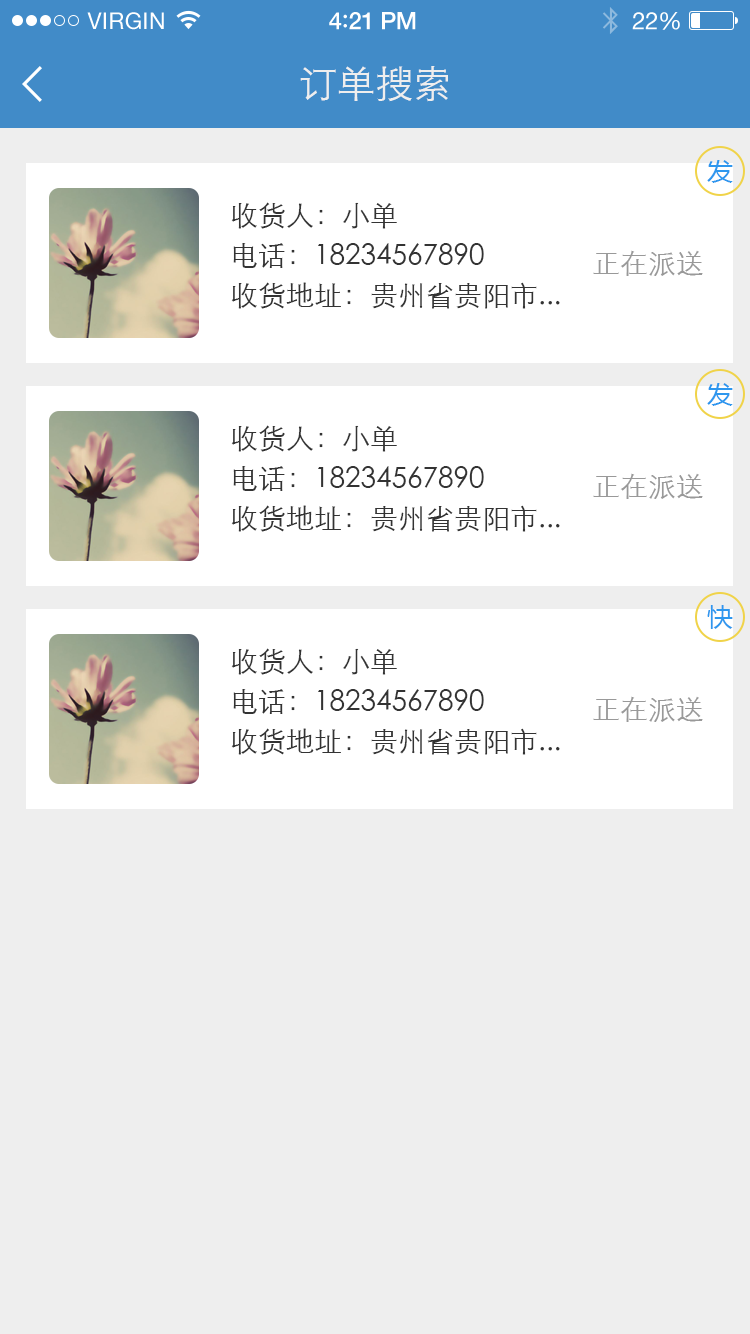
<style>
.page{position:relative;width:750px;height:1334px;background:#eeeeee}
.page>*{position:absolute;margin:0}
.t1{font:23px "HelveticaNeue";letter-spacing:0.02em;color:#ffffff}
.t2{font:24px "HelveticaNeue-Medium";letter-spacing:-0.02em;color:#ffffff}
.t3{font:26px "Avenir-Medium";letter-spacing:-0.02em;color:#ffffff}
.t4{font:24px "HelveticaNeue";letter-spacing:-0.02em;color:#ffffff}
.t5{font:38px "STXihei";color:#eeeeee}
.t6{font:26px "MicrosoftYaHei";color:#2e97ee}
.t7{font:28px/40px "STXihei";color:#333333}
.t8{font:28px "STXihei";color:#999999}
</style>
<div class="page">
<p class="t1" style="left:87px;top:12px;width:77px;height:18px">VIRGIN</p>
<p class="t2" style="left:329px;top:12px;width:87px;height:18px">4<span class="t3">:</span>21 PM</p>
<p class="t4" style="left:632px;top:12px;width:48px;height:18px">22%</p>
<p class="t5" style="left:300px;top:66px;width:148px;height:36px">订单搜索</p>
<p class="t6" style="left:707px;top:160px;width:26px;height:23px">发</p>
<p class="t7" style="left:231px;top:202px;width:329px;height:107px">收货人：小单<br>电话：18234567890<br>收货地址：贵州省贵阳市...</p>
<p class="t8" style="left:593px;top:250px;width:110px;height:26px">正在派送</p>
<p class="t6" style="left:707px;top:383px;width:26px;height:23px">发</p>
<p class="t7" style="left:231px;top:425px;width:329px;height:107px">收货人：小单<br>电话：18234567890<br>收货地址：贵州省贵阳市...</p>
<p class="t8" style="left:593px;top:473px;width:110px;height:26px">正在派送</p>
<p class="t6" style="left:707px;top:605px;width:26px;height:24px">快</p>
<p class="t7" style="left:231px;top:648px;width:329px;height:107px">收货人：小单<br>电话：18234567890<br>收货地址：贵州省贵阳市...</p>
<p class="t8" style="left:593px;top:696px;width:110px;height:26px">正在派送</p>
</div>
